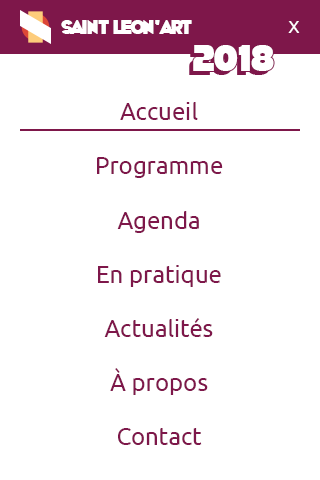
<style>
.page{position:relative;width:320px;height:480px;background:#ffffff}
.page>*{position:absolute;margin:0}
.t1{font:18px "WhoopAss";color:#ffffff}
.t2{font:18px "Ubuntu";color:#ffffff}
.t3{font:36px "StrenuousBl-Regular";color:#ffffff}
.t4{font:24px "Ubuntu";color:#7e174a}
</style>
<div class="page">
<p class="t1" style="left:61px;top:20px;width:131px;height:14px">Saint LEON’ART</p>
<p class="t2" style="left:288px;top:21px;width:12px;height:12px">X</p>
<p class="t3" style="left:193px;top:45px;width:81px;height:26px">2018</p>
<p class="t4" style="left:120px;top:102px;width:78px;height:18px">Accueil</p>
<p class="t4" style="left:97px;top:157px;width:126px;height:21px">Programme</p>
<p class="t4" style="left:117px;top:211px;width:82px;height:22px">Agenda</p>
<p class="t4" style="left:98px;top:265px;width:123px;height:22px">En pratique</p>
<p class="t4" style="left:104px;top:318px;width:109px;height:19px">Actualités</p>
<p class="t4" style="left:110px;top:368px;width:98px;height:27px">À propos</p>
<p class="t4" style="left:118px;top:428px;width:84px;height:17px">Contact</p>
</div>
